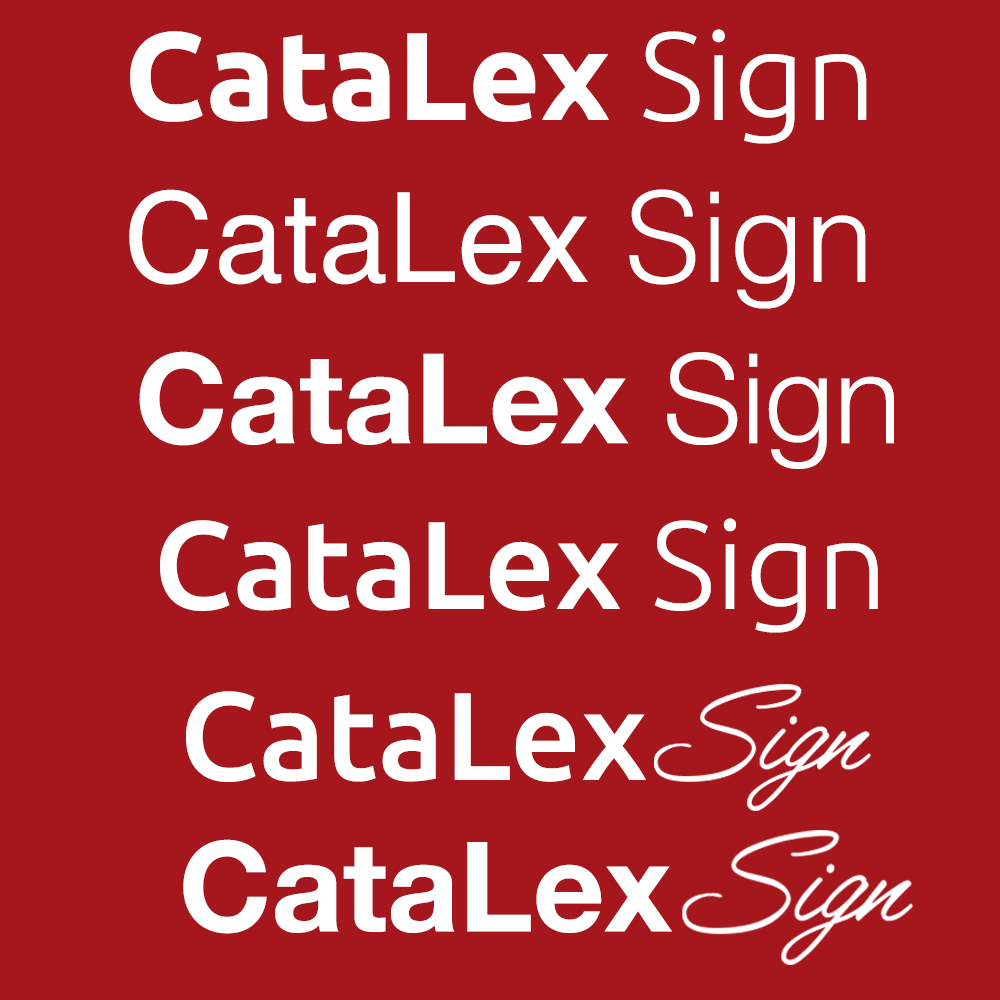
<style>
.page{position:relative;width:1000px;height:1000px;background:#a6171d}
.page>*{position:absolute;margin:0}
.t1{font:125px "Ubuntu-Bold";color:#ffffff}
.t2{font:125px "Ubuntu-Light";color:#ffffff}
.t3{font:125px "Helvetica";color:#ffffff}
.t4{font:125px "Helvetica-Light";color:#ffffff}
.t5{font:125px "HelveticaNeue-Bold";color:#ffffff}
.t6{font:125px "HelveticaNeue-Light";color:#ffffff}
.t7{font:125px "Ubuntu-Medium";color:#ffffff}
</style>
<div class="page">
<p class="t1" style="left:130px;top:29px;width:737px;height:115px">CataLex <span class="t2">Sign</span></p>
<p class="t3" style="left:129px;top:189px;width:737px;height:120px">CataLex<span class="t4"> Sign</span></p>
<p class="t5" style="left:139px;top:351px;width:755px;height:118px">CataLex<span class="t6"> Sign</span></p>
<p class="t7" style="left:160px;top:518px;width:718px;height:115px">CataLex <span class="t2">Sign</span></p>
<p class="t7" style="left:186px;top:691px;width:460px;height:91px">CataLex</p>
<p class="t5" style="left:183px;top:839px;width:489px;height:95px">CataLex</p>
</div>
